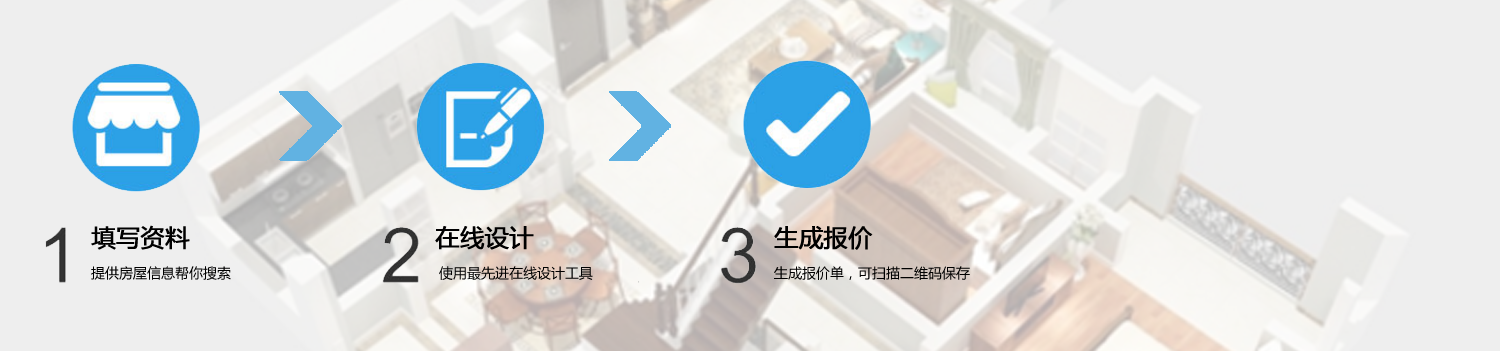
<style>
.page{position:relative;width:1500px;height:351px;background:#eeeeee}
.page>*{position:absolute;margin:0}
.t1{font:24px "MicrosoftYaHei";color:#000000;font-weight:bold}
.t2{font:14px "MicrosoftYaHei";color:#000000}
</style>
<div class="page">
<p class="t1" style="left:91px;top:225px;width:99px;height:25px">填写资料</p>
<p class="t1" style="left:435px;top:226px;width:99px;height:24px">在线设计</p>
<p class="t1" style="left:774px;top:226px;width:99px;height:24px">生成报价</p>
<p class="t2" style="left:91px;top:266px;width:140px;height:14px">提供房屋信息帮你搜索</p>
<p class="t2" style="left:439px;top:266px;width:154px;height:14px">使用最先进在线设计工具</p>
<p class="t2" style="left:774px;top:266px;width:196px;height:14px">生成报价单，可扫描二维码保存</p>
</div>
